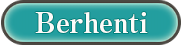
<style>
.page{position:relative;width:181px;height:45px}
.page>*{position:absolute;margin:0}
.t1{font:28px "RyuminPro-ExBold";color:#fdfbf9}
</style>
<div class="page">
<p class="t1" style="left:35px;top:12px;width:113px;height:21px">Berhenti</p>
</div>
